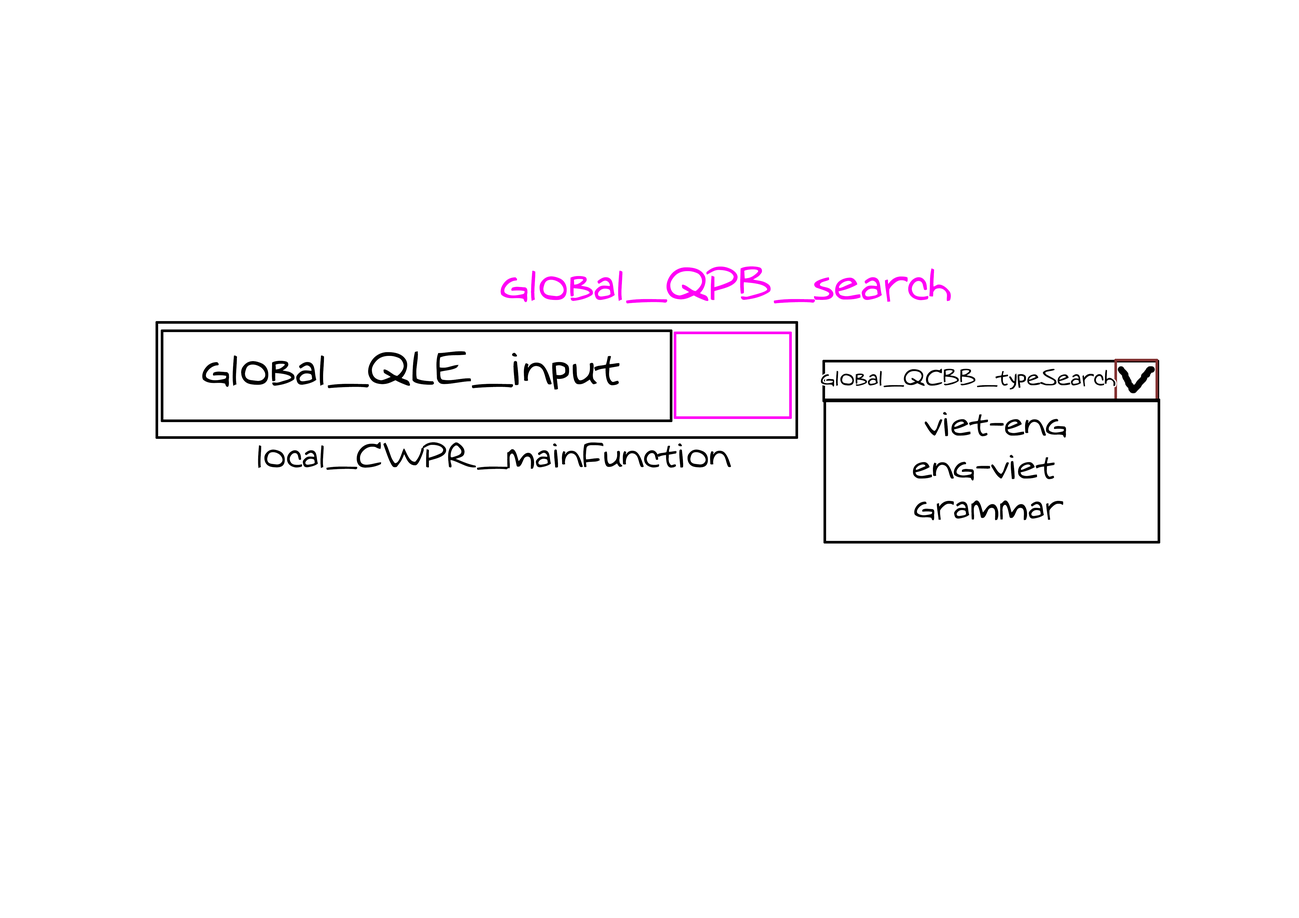
<style>
.page{position:relative;width:1299px;height:918px;background:#ffffff}
.page>*{position:absolute;margin:0}
.t1{font:43.6px "MTOaugie-Regular";color:#ff00f6}
.t2{font:43.6px "MTOaugie-Regular";color:#000000}
.t3{font:21.8px "MTOaugie-Regular";color:#000000}
.t4{font:32.7px "MTOaugie-Regular";color:#000000}
</style>
<div class="page">
<p class="t1" style="left:500px;top:266px;width:451px;height:38px">global_QPB_search</p>
<p class="t2" style="left:202px;top:351px;width:417px;height:39px">global_QLE_input</p>
<p class="t3" style="left:821px;top:369px;width:294px;height:21px">global_QCBB_typeSearch</p>
<p class="t4" style="left:924px;top:412px;width:142px;height:26px">viet-eng</p>
<p class="t4" style="left:258px;top:442px;width:473px;height:28px">local_CWPR_mainFunction</p>
<p class="t4" style="left:912px;top:455px;width:142px;height:26px">eng-viet</p>
<p class="t4" style="left:914px;top:500px;width:149px;height:21px">grammar</p>
</div>
